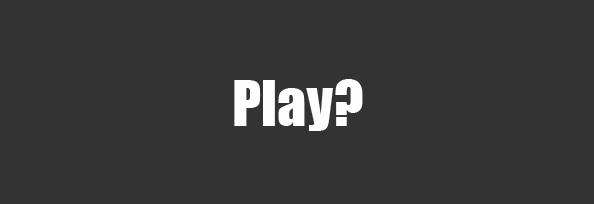
<style>
.page{position:relative;width:594px;height:204px;background:#333333}
.page>*{position:absolute;margin:0}
.t1{font:58.3px "Impact";color:#fffefe}
</style>
<div class="page">
<p class="t1" style="left:234px;top:79px;width:129px;height:52px">Play?</p>
</div>
